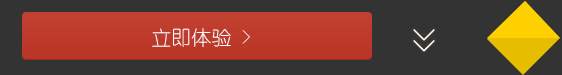
<style>
.page{position:relative;width:562px;height:75px;background:#333333}
.page>*{position:absolute;margin:0}
.t1{font:20px "YouYuan";color:#ffffff}
</style>
<div class="page">
<p class="t1" style="left:152px;top:28px;width:98px;height:19px">立即体验 &gt;</p>
</div>
